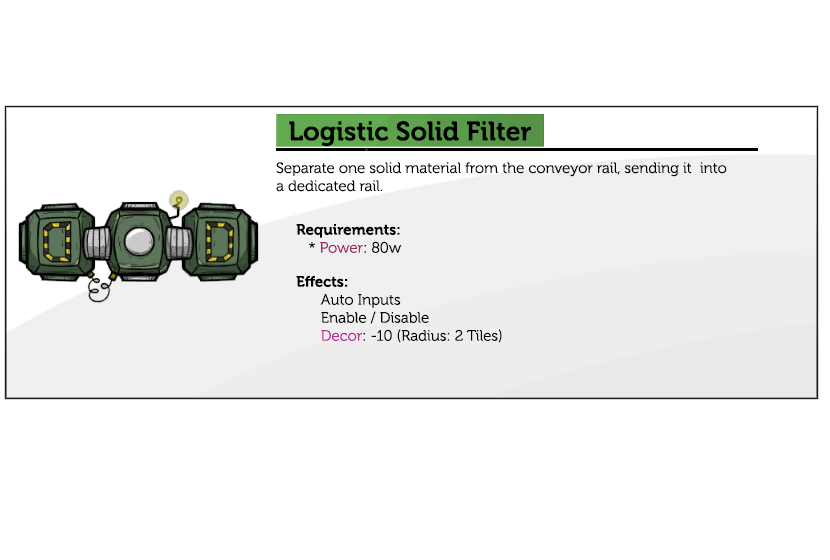
<style>
.page{position:relative;width:830px;height:560px;background:#ffffff}
.page>*{position:absolute;margin:0}
.t1{font:26.7px "Museo-700";color:#000000}
.t2{font:15px "Museo-300";color:#000000}
.t3{font:15px "Museo-700";color:#000000}
.t4{font:15px "Museo-300";color:#a12864}
.t5{font:15px "Museo-300";color:#bc2991}
</style>
<div class="page">
<p class="t1" style="left:289px;top:121px;width:242px;height:26px">Logistic Solid Filter</p>
<p class="t2" style="left:276px;top:162px;width:451px;height:30px">Separate one solid material from the conveyor rail, sending it  into a dedicated rail.</p>
<p class="t3" style="left:296px;top:224px;width:106px;height:29px">Requirements:<br><span class="t2">   * </span><span class="t4">Power</span><span class="t2">: 80w</span></p>
<p class="t2" style="left:296px;top:275px;width:206px;height:68px"><span class="t3">Effects:</span><br>      Auto Inputs<br>      Enable / Disable<br>      <span class="t5">Decor</span>: -10 (Radius: 2 Tiles)</p>
</div>
